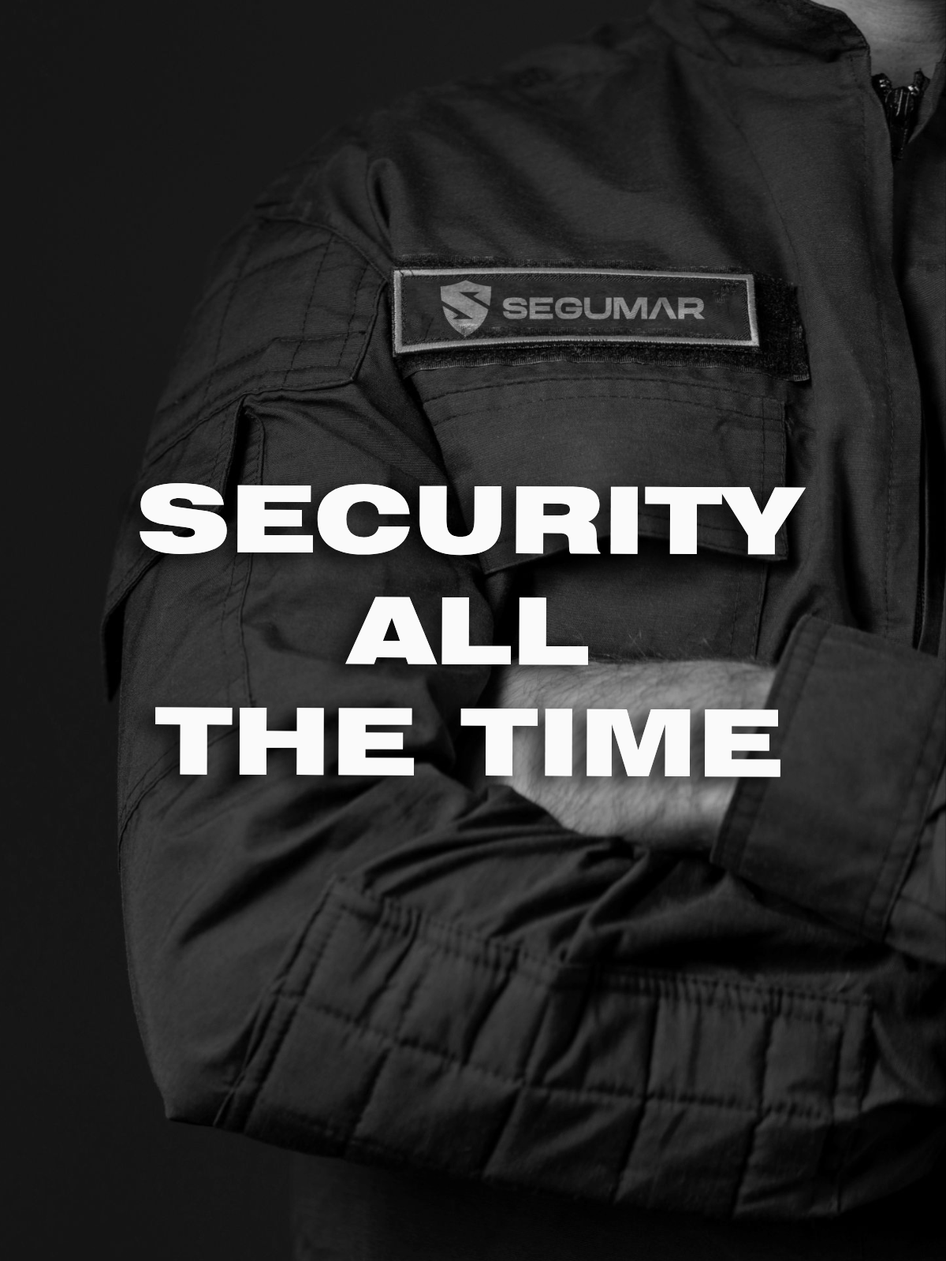
<style>
.page{position:relative;width:946px;height:1261px}
.page>*{position:absolute;margin:0}
.t1{font:92.6px "Swiss721BT-BlackExtended";color:#fafafa;text-transform:uppercase}
</style>
<div class="page">
<p class="t1" style="left:139px;top:483px;width:667px;height:294px;text-align:center">security<br>all<br>the time</p>
<p class="t1" style="left:139px;top:483px;width:667px;height:294px;text-align:center">security<br>all<br>the time</p>
</div>
